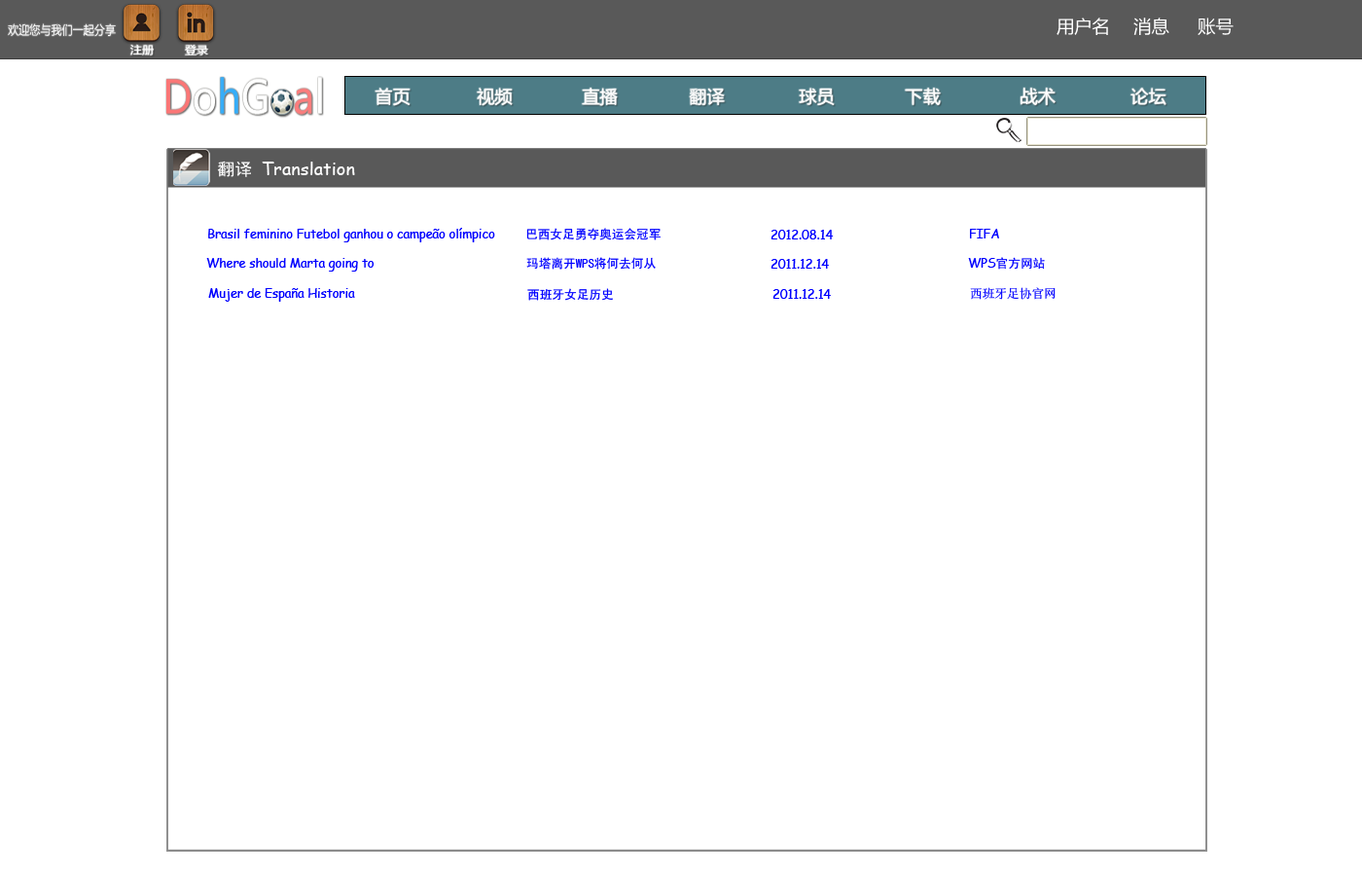
<style>
.page{position:relative;width:1362px;height:876px;background:#ffffff}
.page>*{position:absolute;margin:0}
.t1{font:17.8px "MicrosoftYaHei";color:#ffffff}
.t2{font:12.4px "MicrosoftYaHei";color:#ffffff;scale:0.87 1}
.t3{font:11px "MicrosoftYaHei";color:#ffffff;scale:1.05 1}
.t4{font:17.8px "ComicSansMS";color:#ffffff}
.t5{font:17.8px "SimHei";color:#ffffff}
.t6{font:12.3px "ComicSansMS";color:#0000ff}
.t7{font:12.3px "SimHei";color:#0000ff}
.t8{font:12.3px "SimSun";color:#0000ff}
</style>
<div class="page">
<p class="t1" style="left:1056px;top:18px;width:52px;height:17px">用户名</p>
<p class="t1" style="left:1133px;top:18px;width:36px;height:17px">消息</p>
<p class="t1" style="left:1198px;top:18px;width:36px;height:17px">账号</p>
<p class="t2" style="left:8px;top:23px;width:108px;height:14px">欢迎您与我们一起分享</p>
<p class="t3" style="left:130px;top:44px;width:24px;height:11px">注册</p>
<p class="t3" style="left:185px;top:45px;width:23px;height:10px">登录</p>
<p class="t1" style="left:375px;top:88px;width:36px;height:18px">首页</p>
<p class="t1" style="left:477px;top:88px;width:36px;height:18px">视频</p>
<p class="t1" style="left:582px;top:88px;width:36px;height:18px">直播</p>
<p class="t1" style="left:689px;top:88px;width:36px;height:17px">翻译</p>
<p class="t1" style="left:799px;top:88px;width:36px;height:17px">球员</p>
<p class="t1" style="left:905px;top:88px;width:36px;height:17px">下载</p>
<p class="t1" style="left:1020px;top:88px;width:36px;height:17px">战术</p>
<p class="t1" style="left:1130px;top:88px;width:36px;height:17px">论坛</p>
<p class="t4" style="left:217px;top:161px;width:138px;height:16px"><span class="t5">翻译 </span>Translation</p>
<p class="t6" style="left:208px;top:228px;width:287px;height:14px">Brasil feminino Futebol ganhou o campeão olímpico</p>
<p class="t7" style="left:526px;top:228px;width:135px;height:12px">巴西女足勇夺奥运会冠军</p>
<p class="t6" style="left:770px;top:230px;width:64px;height:9px">2012.08.14</p>
<p class="t6" style="left:970px;top:229px;width:29px;height:9px">FIFA</p>
<p class="t6" style="left:206px;top:258px;width:168px;height:13px">Where should Marta going to</p>
<p class="t7" style="left:526px;top:257px;width:130px;height:12px">玛塔离开WPS将何去何从</p>
<p class="t7" style="left:968px;top:257px;width:77px;height:12px"><span class="t6">WPS</span>官方网站</p>
<p class="t6" style="left:770px;top:259px;width:59px;height:9px">2011.12.14</p>
<p class="t6" style="left:208px;top:288px;width:147px;height:14px">Mujer de España Historia</p>
<p class="t7" style="left:527px;top:288px;width:86px;height:13px">西班牙女足历史</p>
<p class="t6" style="left:772px;top:289px;width:59px;height:10px">2011.12.14</p>
<p class="t8" style="left:970px;top:287px;width:86px;height:13px">西班牙足协官网</p>
</div>
